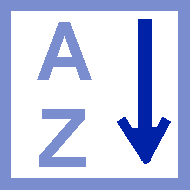
<style>
.page{position:relative;width:190px;height:190px;background:#ffffff}
.page>*{position:absolute;margin:0}
.t1{font:80px "Arial-BoldMT";color:#7a8dcf}
</style>
<div class="page">
<p class="t1" style="left:37px;top:22px;width:55px;height:58px">A</p>
<p class="t1" style="left:39px;top:109px;width:47px;height:58px">Z</p>
</div>
